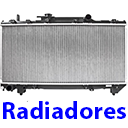
<style>
.page{position:relative;width:128px;height:128px;background:#ffffff}
.page>*{position:absolute;margin:0}
.t1{font:25px "MyriadPro-Bold";color:#0000ff}
</style>
<div class="page">
<p class="t1" style="left:3px;top:101px;width:123px;height:18px">Radiadores</p>
</div>
